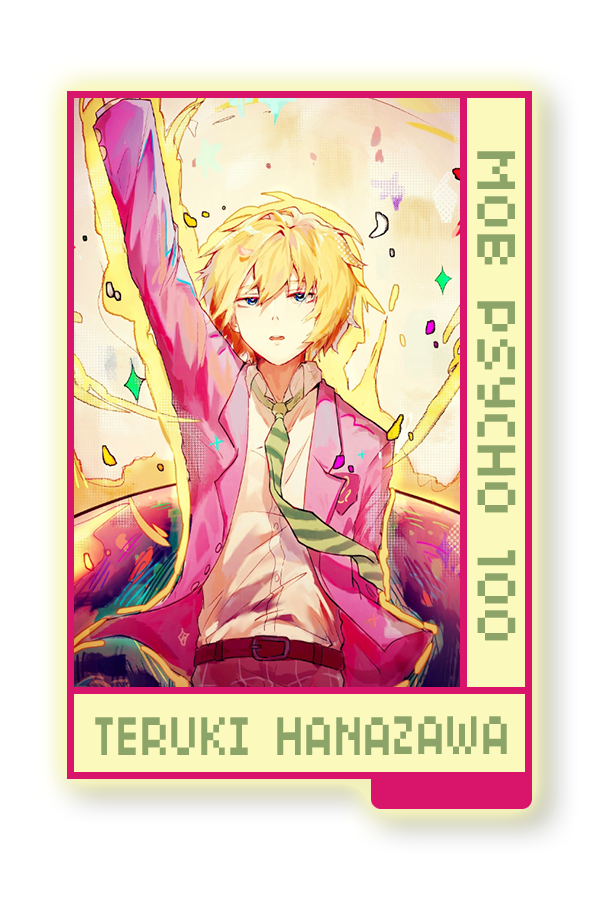
<style>
.page{position:relative;width:600px;height:900px;background:#ffffff}
.page>*{position:absolute;margin:0}
.t1{font:60.3px "04b03";color:#8ca467}
.t2{font:60.3px "04b03";color:#8ca467;scale:0.78 1}
</style>
<div class="page">
<p class="t1" style="left:477px;top:151px;width:39px;height:490px;rotate:90deg">MOB PSYCHO 100</p>
<p class="t2" style="left:95px;top:716px;width:412px;height:39px">TERUKI HANAZAWA</p>
</div>
